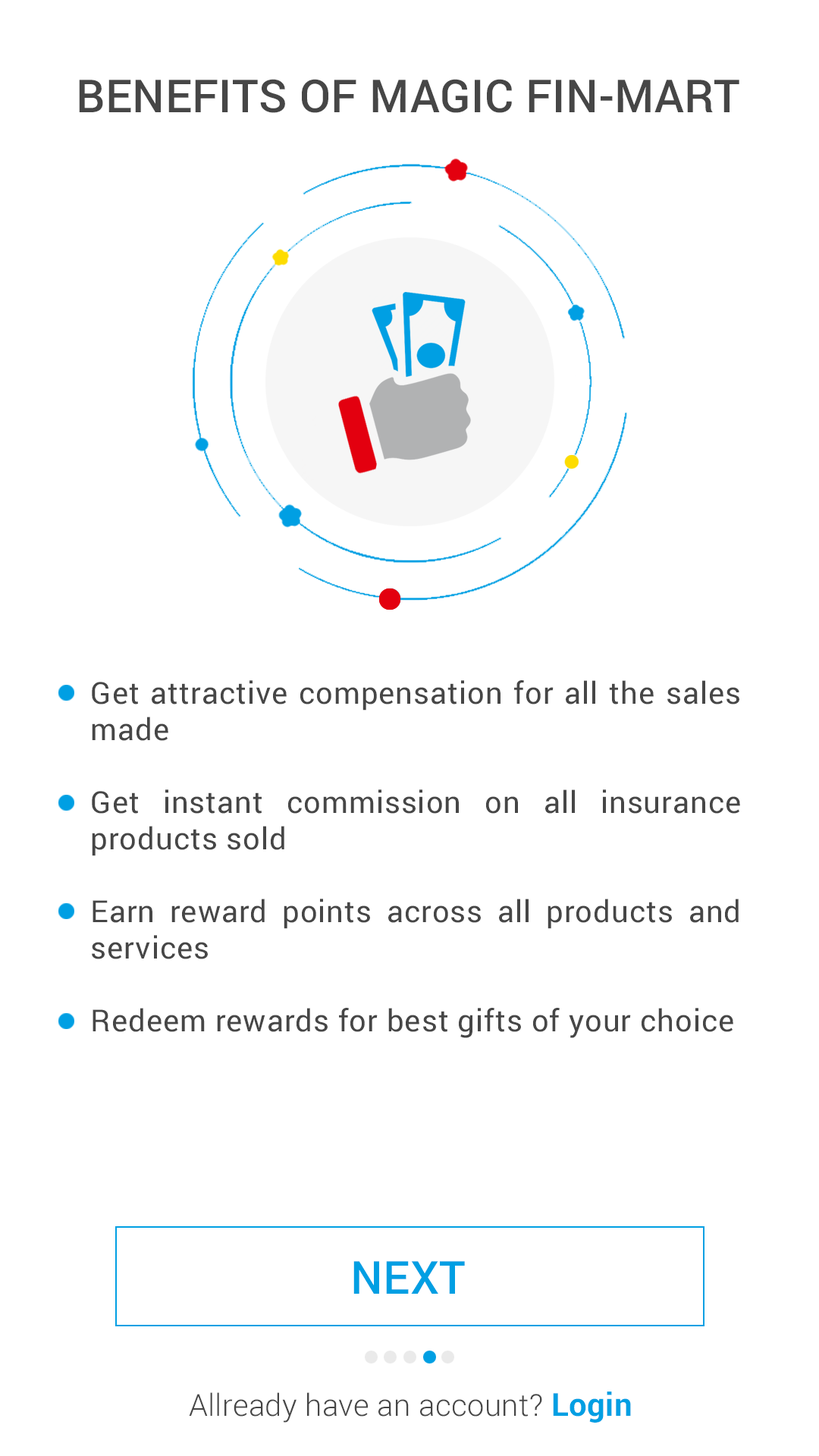
<style>
.page{position:relative;width:819px;height:1456px;background:#ffffff}
.page>*{position:absolute;margin:0}
.t1{font:45.5px "Roboto-Medium";letter-spacing:0.01em;color:#464646;text-transform:uppercase}
.t2{font:30.3px "Roboto-Regular";letter-spacing:0.025em;color:#464646}
.t3{font:45.5px "Roboto-Medium";letter-spacing:0.01em;color:#009fe3;text-transform:uppercase}
.t4{font:30.3px "Roboto-Light";letter-spacing:0.01em;color:#464646}
.t5{font:31.8px "Roboto-Bold";letter-spacing:0.01em;color:#009fe3}
</style>
<div class="page">
<p class="t1" style="left:79px;top:79px;width:660px;height:34px">BENEFITS of magic fin-mart</p>
<p class="t2" style="left:92px;top:680px;width:648px;height:358px;text-align:justify">Get attractive compensation for all the sales made<br><br>Get instant commission on all insurance products sold<br><br>Earn reward points across all products and services<br><br>Redeem rewards for best gifts of your choice</p>
<p class="t3" style="left:353px;top:1261px;width:112px;height:33px">NEXT</p>
<p class="t4" style="left:189px;top:1392px;width:442px;height:31px">Allready have an account? <span class="t5">Login</span></p>
</div>
